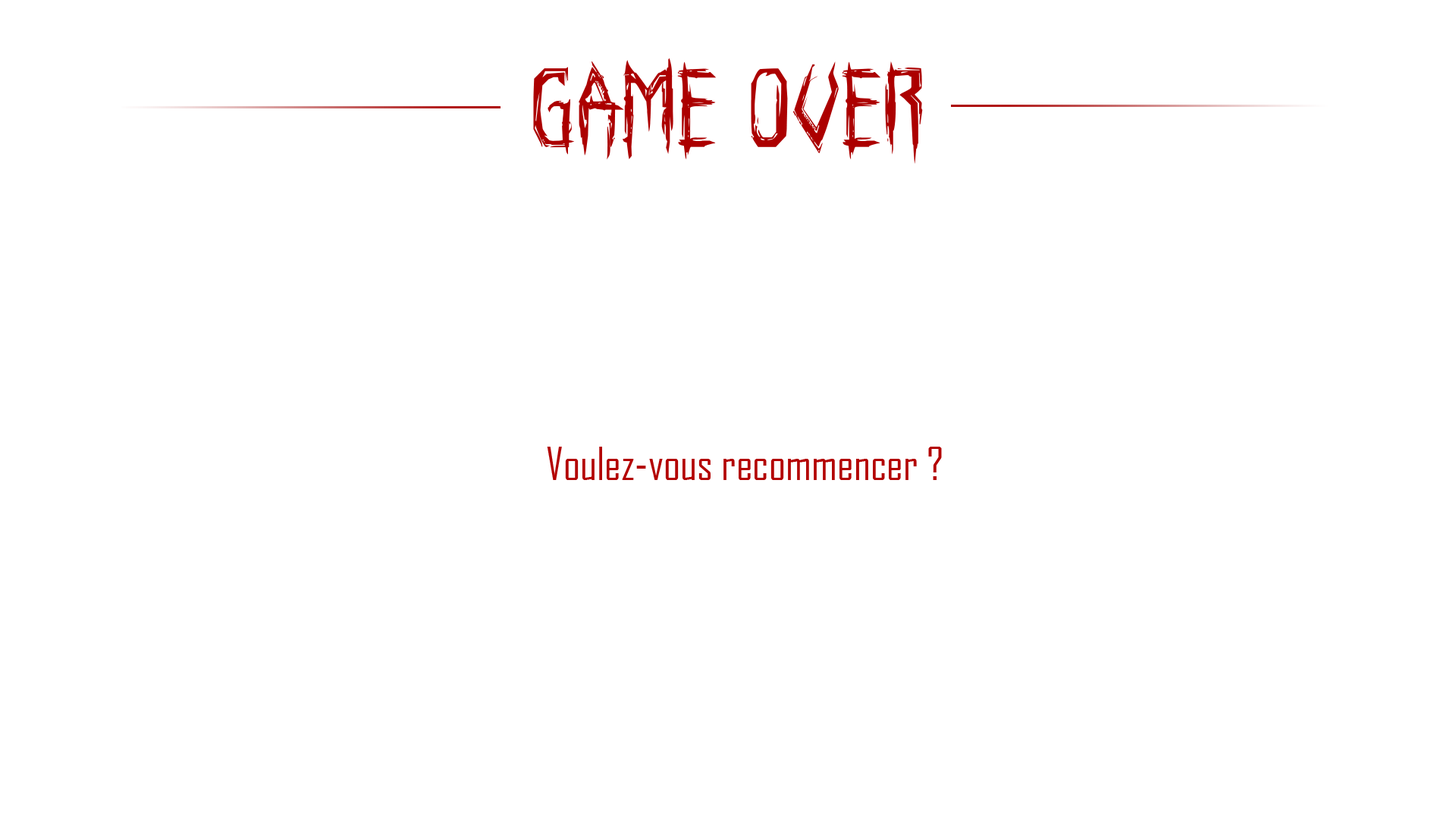
<style>
.page{position:relative;width:1456px;height:819px;background:#ffffff}
.page>*{position:absolute;margin:0}
.t1{font:113.7px "Horroroid";color:#ac0000}
.t2{font:44.2px "AgencyFB-Reg";color:#b30000}
</style>
<div class="page">
<p class="t1" style="left:533px;top:58px;width:390px;height:106px">Game Over</p>
<p class="t2" style="left:547px;top:447px;width:395px;height:33px">Voulez-vous recommencer ?</p>
</div>
